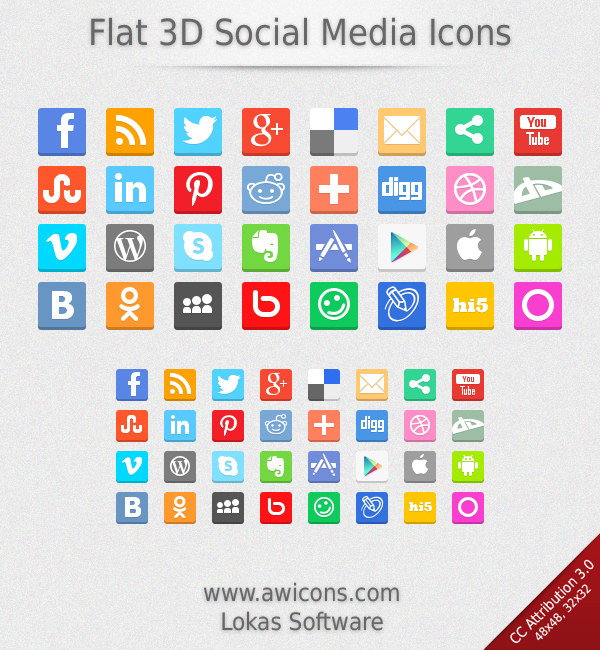
<style>
.page{position:relative;width:600px;height:650px}
.page>*{position:absolute;margin:0}
.t1{font:36px "DejaVuSansCondensed";color:#676767}
.t2{font:14px "DejaVuSansCondensed";color:#ffffff}
.t3{font:12px "DejaVuSansCondensed";color:#ffffff}
.t4{font:24px "DejaVuSansCondensed";color:#676767}
</style>
<div class="page">
<p class="t1" style="left:91px;top:17px;width:420px;height:29px">Flat 3D Social Media Icons</p>
<p class="t2" style="left:510px;top:559px;width:84px;height:84px;text-align:center;rotate:-45deg">CC Attribution 3.0<br><span class="t3">48x48, 32x32</span></p>
<p class="t4" style="left:204px;top:582px;width:195px;height:49px;text-align:center">www.awicons.com<br>Lokas Software</p>
</div>
